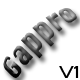
<style>
.page{position:relative;width:80px;height:80px;background:#ffffff}
.page>*{position:absolute;margin:0}
.t1{font:24px "Silom"}
.t2{font:16px "BlairMdITCTTMedium";color:#000000}
</style>
<div class="page">
<p class="t1" style="left:3px;top:8px;width:74px;height:70px;rotate:-45deg">Gappro</p>
<p class="t2" style="left:59px;top:66px;width:20px;height:12px">V1</p>
</div>
